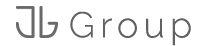
<style>
.page{position:relative;width:215px;height:46px;background:#ffffff}
.page>*{position:absolute;margin:0}
.t1{font:36px "Raleway-Light";letter-spacing:0.15em;color:#616161}
</style>
<div class="page">
<p class="t1" style="left:70px;top:11px;width:121px;height:35px">Group</p>
</div>
